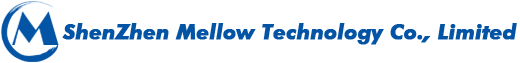
<style>
.page{position:relative;width:520px;height:63px;background:#ffffff}
.page>*{position:absolute;margin:0}
.t1{font:21px "FuturaBT-BoldItalic";letter-spacing:-0.01em;color:#0454a6;font-weight:bold}
</style>
<div class="page">
<p class="t1" style="left:62px;top:23px;width:455px;height:22px">ShenZhen Mellow Technology Co., Limited</p>
</div>
